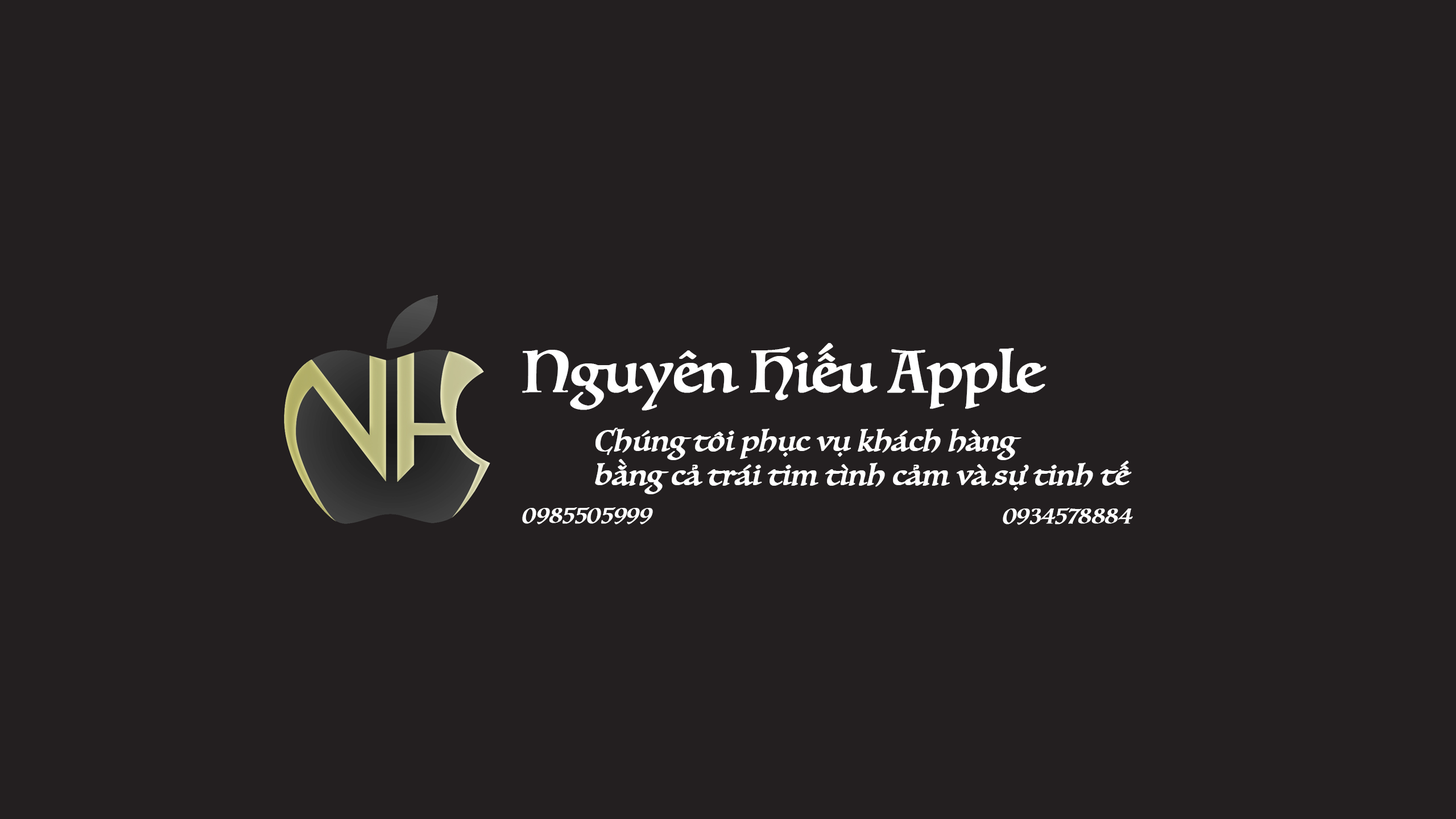
<style>
.page{position:relative;width:1456px;height:819px;background:#231f20}
.page>*{position:absolute;margin:0}
.t1{font:56.9px "Luminari-Regular";color:#ffffff;font-weight:bold}
.t2{font:28.4px "Luminari-Regular";color:#ffffff;font-weight:bold;font-style:italic}
.t3{font:22.7px "Luminari-Regular";color:#ffffff;font-weight:bold;font-style:italic}
</style>
<div class="page">
<p class="t1" style="left:522px;top:343px;width:524px;height:68px">Nguyên Hiếu Apple</p>
<p class="t2" style="left:595px;top:428px;width:537px;height:66px">Chúng tôi phục vụ khách hàng  <br>bằng cả trái tim tình cảm và sự tinh tế</p>
<p class="t3" style="left:522px;top:507px;width:131px;height:17px">0985505999</p>
<p class="t3" style="left:1003px;top:508px;width:130px;height:17px">0934578884</p>
</div>
